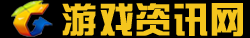
<style>
.page{position:relative;width:250px;height:38px;background:#000000}
.page>*{position:absolute;margin:0}
.t1{font:36px "BDZYJT--GB1-0";color:#f4c51d;font-weight:bold}
</style>
<div class="page">
<p class="t1" style="left:62px;top:3px;width:181px;height:34px">游戏资讯网</p>
</div>
